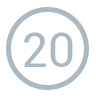
<style>
.page{position:relative;width:96px;height:96px;background:#ffffff}
.page>*{position:absolute;margin:0}
.t1{font:48px "Roboto-Regular";color:#abb9c5}
</style>
<div class="page">
<p class="t1" style="left:24px;top:32px;width:49px;height:35px">20</p>
</div>
